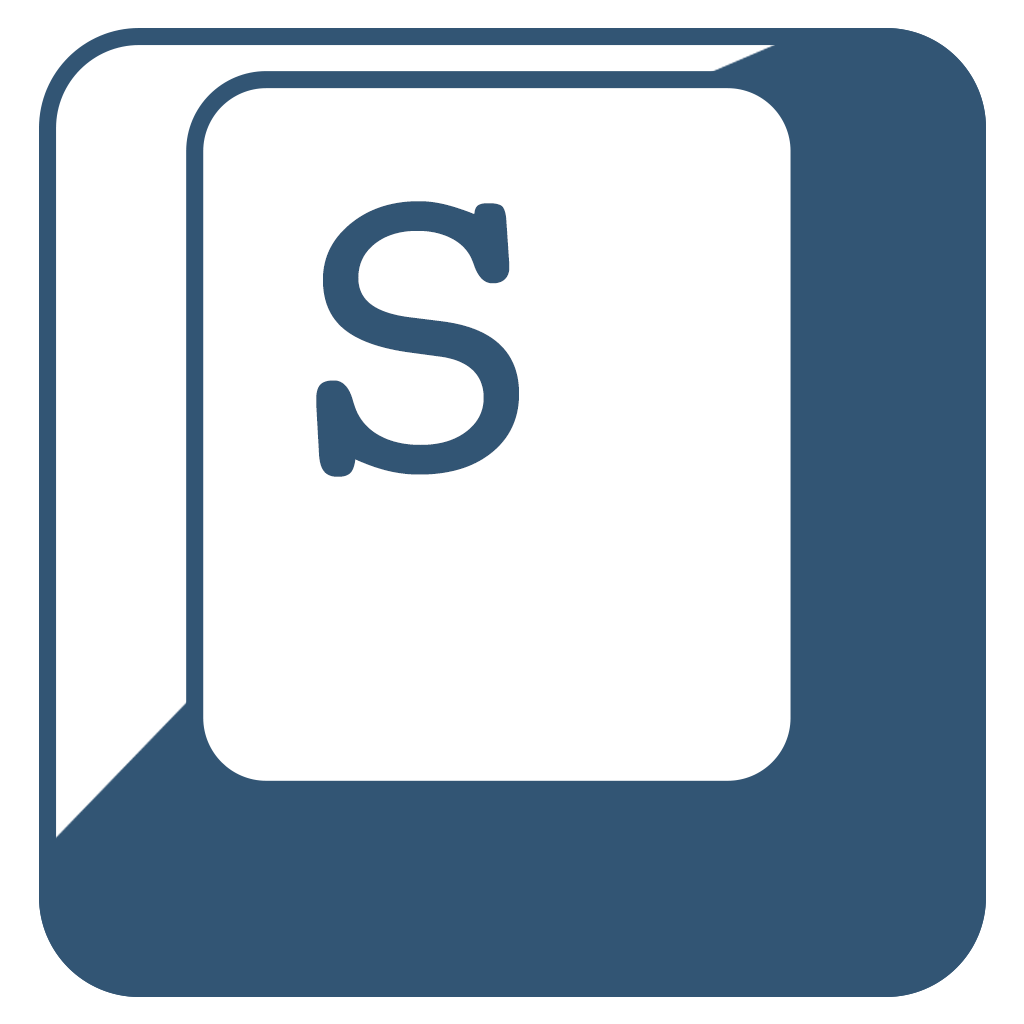
<style>
.page{position:relative;width:1024px;height:1024px;background:#ffffff}
.page>*{position:absolute;margin:0}
.t1{font:445.9px "Courier";color:#325574}
</style>
<div class="page">
<p class="t1" style="left:316px;top:201px;width:203px;height:276px">S</p>
</div>
